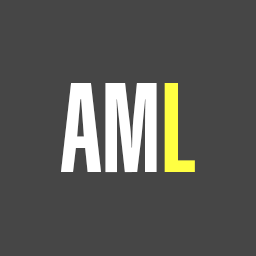
<style>
.page{position:relative;width:256px;height:256px;background:#464646}
.page>*{position:absolute;margin:0}
.t1{font:124.4px "HelveticaLTStd-UltraComp";color:#ffffff;text-transform:uppercase}
.t2{font:124.4px "HelveticaLTStd-UltraComp";color:#ffff42;text-transform:uppercase}
</style>
<div class="page">
<p class="t1" style="left:61px;top:83px;width:134px;height:90px">am<span class="t2">l</span></p>
</div>
